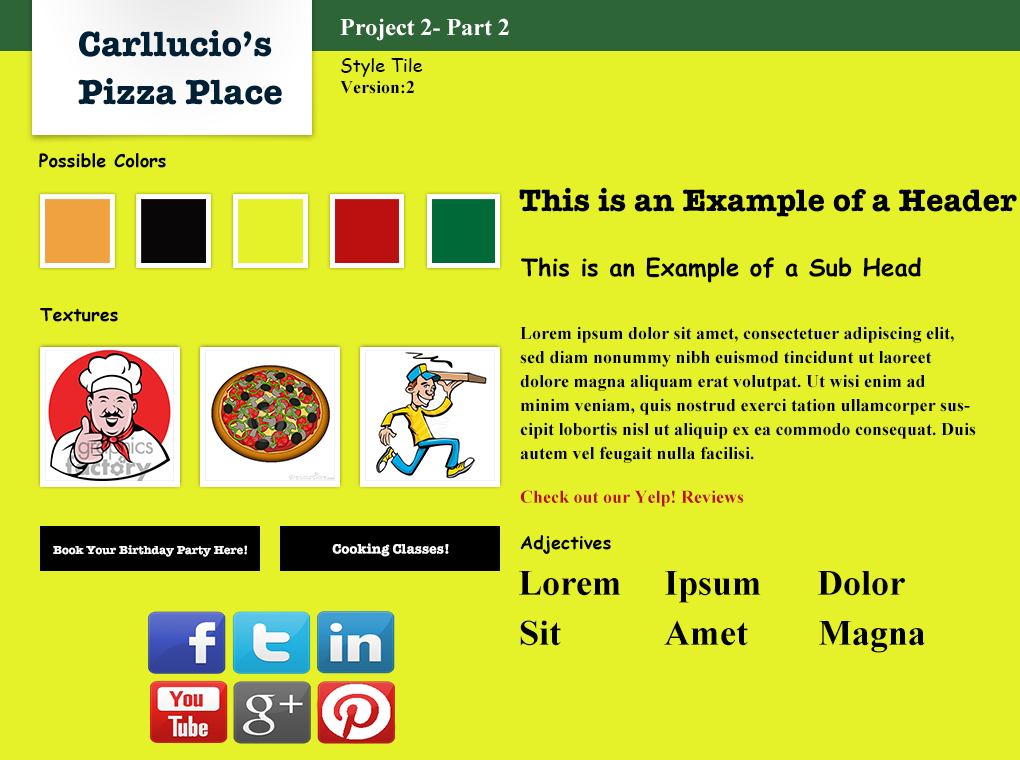
<style>
.page{position:relative;width:1020px;height:760px;background:#e5f129}
.page>*{position:absolute;margin:0}
.t1{font:36px/24px "AmericanTypewriter-Bold";color:#002035}
.t2{font:24px "TimesNewRomanPS-BoldMT";color:#ffffff}
.t3{font:18px "ComicSansMS";color:#000000}
.t4{font:18px "TimesNewRomanPS-BoldMT";color:#000000}
.t5{font:18px "ComicSansMS-Bold";color:#000000}
.t6{font:32px "AmericanTypewriter-Bold";color:#000000}
.t7{font:24px "ComicSansMS-Bold";color:#000000}
.t8{font:18px/24px "TimesNewRomanPS-BoldMT";color:#000000}
.t9{font:18px "TimesNewRomanPS-BoldMT";color:#bb1010}
.t10{font:12px "AmericanTypewriter-Bold";color:#ffffff}
.t11{font:14px "AmericanTypewriter-Bold";color:#ffffff}
.t12{font:36px "TimesNewRomanPS-BoldMT";color:#000000}
</style>
<div class="page">
<p class="t1" style="left:78px;top:30px;width:204px;height:75px">Carllucio’s<br><br>Pizza Place</p>
<p class="t2" style="left:340px;top:18px;width:169px;height:23px">Project 2- Part 2</p>
<p class="t3" style="left:341px;top:58px;width:82px;height:19px">Style Tile</p>
<p class="t4" style="left:340px;top:80px;width:74px;height:14px">Version:2</p>
<p class="t5" style="left:39px;top:153px;width:127px;height:15px">Possible Colors</p>
<p class="t6" style="left:519px;top:187px;width:498px;height:30px">This is an Example of a Header</p>
<p class="t7" style="left:521px;top:257px;width:400px;height:26px">This is an Example of a Sub Head</p>
<p class="t5" style="left:40px;top:308px;width:78px;height:14px">Textures</p>
<p class="t8" style="left:520px;top:326px;width:456px;height:137px">Lorem ipsum dolor sit amet, consectetuer adipiscing elit, sed diam nonummy nibh euismod tincidunt ut laoreet dolore magna aliquam erat volutpat. Ut wisi enim ad minim veniam, quis nostrud exerci tation ullamcorper suscipit lobortis nisl ut aliquip ex ea commodo consequat. Duis autem vel feugait nulla facilisi.</p>
<p class="t9" style="left:520px;top:490px;width:224px;height:17px">Check out our Yelp! Reviews</p>
<p class="t10" style="left:53px;top:545px;width:194px;height:12px">Book Your Birthday Party Here!</p>
<p class="t11" style="left:332px;top:543px;width:117px;height:14px">Cooking Classes!</p>
<p class="t5" style="left:520px;top:535px;width:91px;height:19px">Adjectives</p>
<p class="t12" style="left:519px;top:571px;width:102px;height:25px">Lorem</p>
<p class="t12" style="left:665px;top:571px;width:96px;height:32px">Ipsum</p>
<p class="t12" style="left:817px;top:571px;width:88px;height:25px">Dolor</p>
<p class="t12" style="left:520px;top:620px;width:41px;height:26px">Sit</p>
<p class="t12" style="left:664px;top:620px;width:84px;height:26px">Amet</p>
<p class="t12" style="left:819px;top:621px;width:106px;height:32px">Magna</p>
</div>
